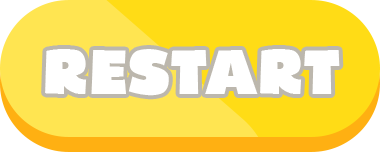
<style>
.page{position:relative;width:380px;height:152px;background:#ffdc16}
.page>*{position:absolute;margin:0}
.t1{font:60px "Bumpo";color:#ffffff}
</style>
<div class="page">
<p class="t1" style="left:45px;top:49px;width:295px;height:47px">RESTART</p>
</div>
